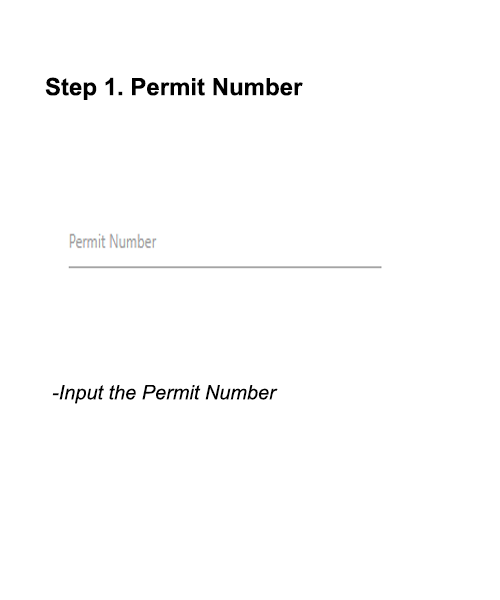
<style>
.page{position:relative;width:500px;height:600px;background:#ffffff}
.page>*{position:absolute;margin:0}
.t1{font:24px "Arial-BoldMT";color:#000000}
.t2{font:20px "Arial-ItalicMT";color:#000000}
</style>
<div class="page">
<p class="t1" style="left:45px;top:77px;width:258px;height:23px">Step 1. Permit Number</p>
<p class="t2" style="left:52px;top:385px;width:226px;height:19px">-Input the Permit Number</p>
</div>
